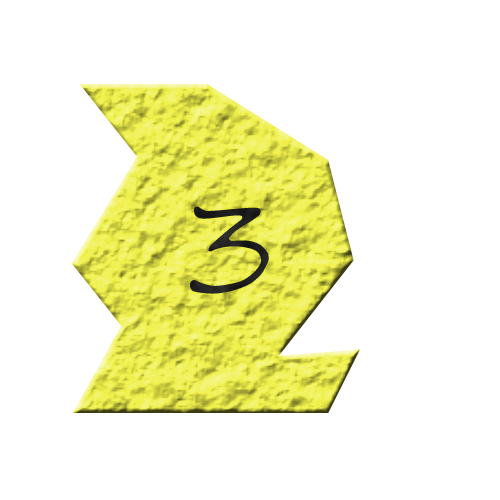
<style>
.page{position:relative;width:500px;height:500px;background:#ffffff}
.page>*{position:absolute;margin:0}
.t1{font:140px "SegoeScript"}
</style>
<div class="page">
<p class="t1" style="left:188px;top:204px;width:83px;height:92px">3</p>
</div>
